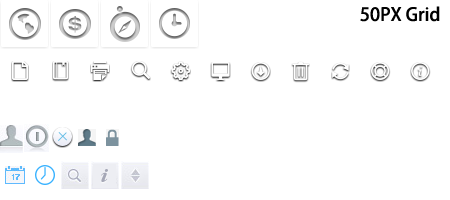
<style>
.page{position:relative;width:450px;height:200px;background:#ffffff}
.page>*{position:absolute;margin:0}
.t1{font:18px "AdobeHeitiStd-Regular";color:#000000}
</style>
<div class="page">
<p class="t1" style="left:360px;top:6px;width:80px;height:16px">50PX Grid</p>
</div>
